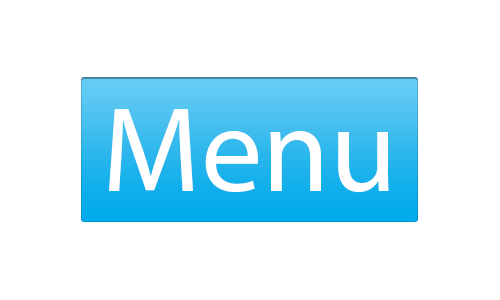
<style>
.page{position:relative;width:500px;height:300px;background:#ffffff}
.page>*{position:absolute;margin:0}
.t1{font:121.9px "MyriadPro-Regular";color:#ffffff}
</style>
<div class="page">
<p class="t1" style="left:109px;top:109px;width:280px;height:84px">Menu</p>
</div>
